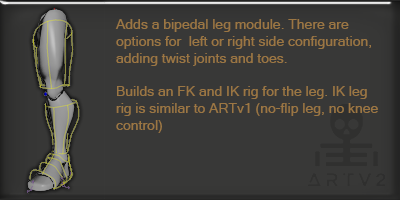
<style>
.page{position:relative;width:400px;height:200px;background:#383837}
.page>*{position:absolute;margin:0}
.t1{font:14px "MicrosoftSansSerif";color:#9b7643}
</style>
<div class="page">
<p class="t1" style="left:115px;top:19px;width:263px;height:114px">Adds a bipedal leg module. There are<br>options for  left or right side configuration,<br>adding twist joints and toes.<br><br>Builds an FK and IK rig for the leg. IK leg<br>rig is similar to ARTv1 (no-flip leg, no knee<br>control)</p>
</div>
